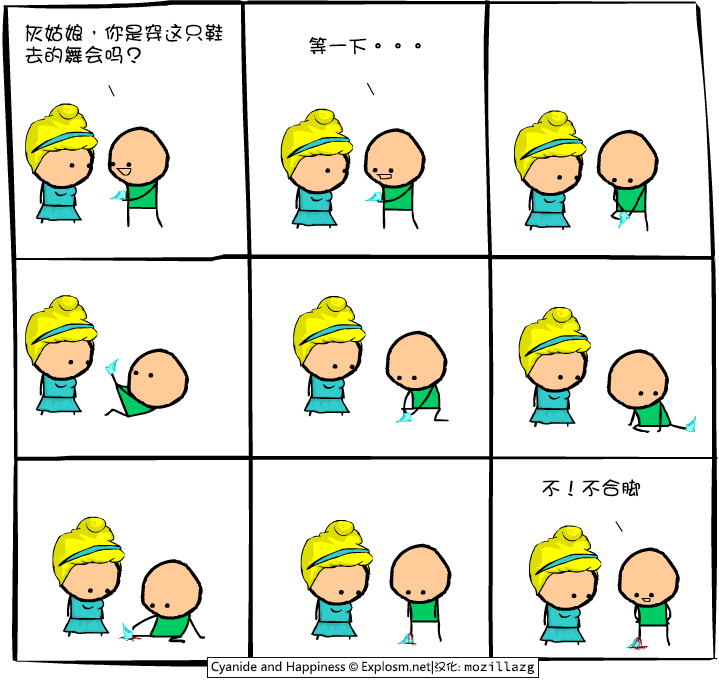
<style>
.page{position:relative;width:719px;height:695px;background:#ffffff}
.page>*{position:absolute;margin:0}
.t1{font:20px/22px "DFGirl";color:#000000}
.t2{font:20px "DFGirl";color:#000000}
</style>
<div class="page">
<p class="t1" style="left:25px;top:23px;width:198px;height:41px">灰姑娘，你是穿这只鞋<br>去的舞会吗？</p>
<p class="t2" style="left:309px;top:37px;width:112px;height:18px">等一下。。。</p>
<p class="t2" style="left:542px;top:479px;width:99px;height:18px">不！不合脚</p>
</div>
